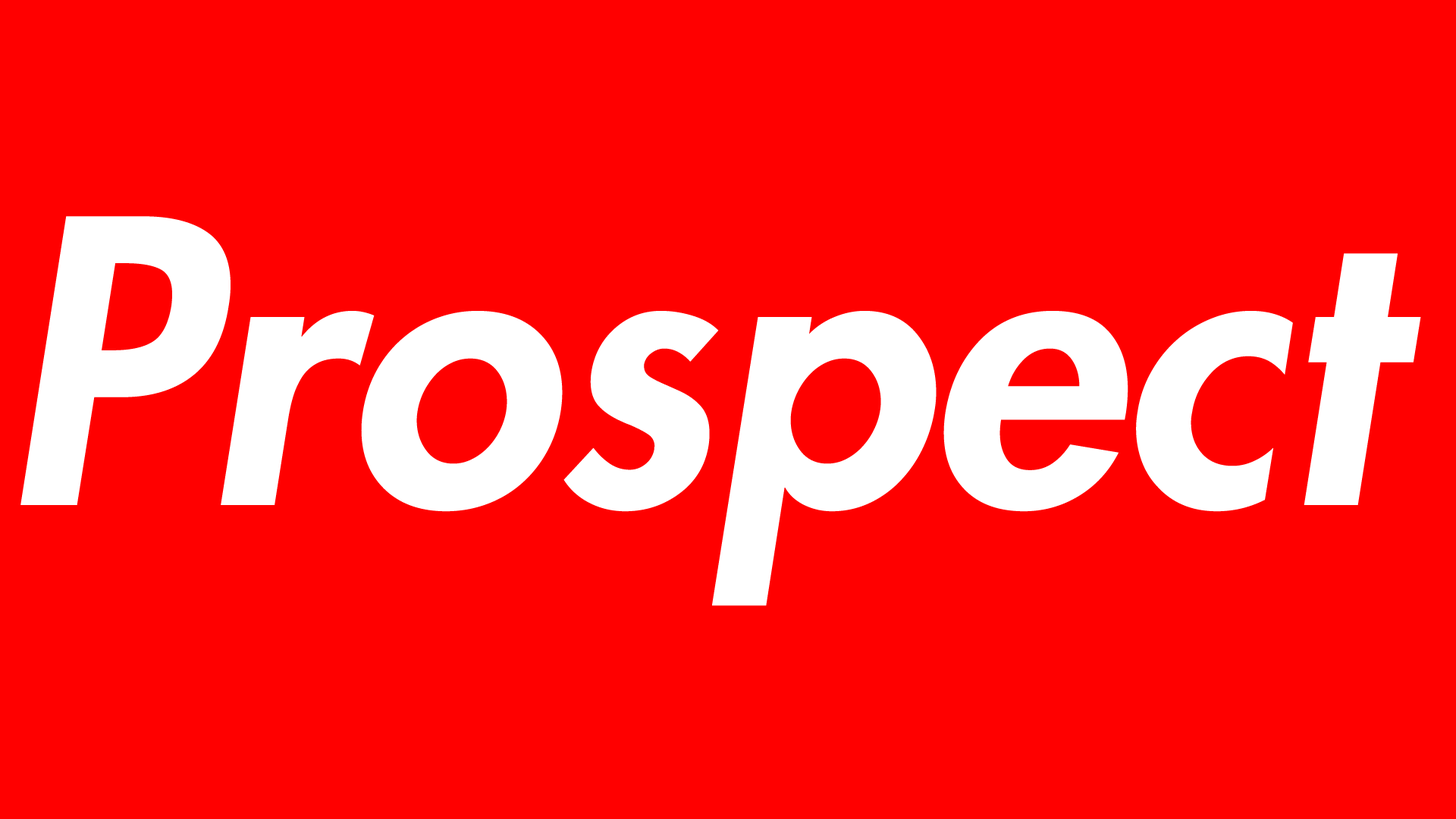
<style>
.page{position:relative;width:1456px;height:819px;background:#ff0000}
.page>*{position:absolute;margin:0}
.t1{font:382.8px "Futura-HeavyOblique";color:#ffffff}
</style>
<div class="page">
<p class="t1" style="left:20px;top:216px;width:1401px;height:390px">Prospect</p>
</div>
